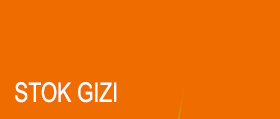
<style>
.page{position:relative;width:280px;height:119px;background:#ef6c00}
.page>*{position:absolute;margin:0}
.t1{font:27px "ArialNarrow";color:#fffefe;scale:0.95 1}
</style>
<div class="page">
<p class="t1" style="left:15px;top:82px;width:102px;height:21px">STOK GIZI</p>
</div>
